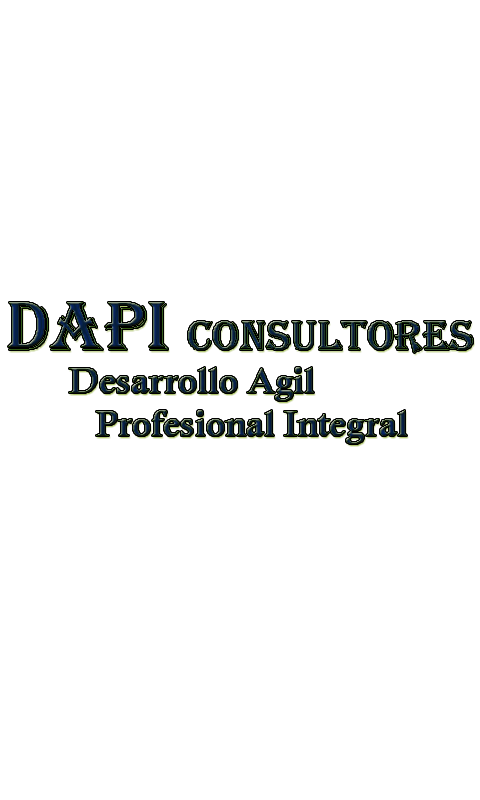
<style>
.page{position:relative;width:480px;height:800px;background:#ffffff}
.page>*{position:absolute;margin:0}
.t1{font:36px "CalisMTBol"}
.t2{font:72px "Algerian"}
.t3{font:44px "Algerian"}
</style>
<div class="page">
<p class="t1" style="left:8px;top:302px;width:465px;height:142px"><span class="t2">DAPI </span><span class="t3">CONSULTORES<br>       </span>Desarrollo Agil <br>       Profesional Integral</p>
</div>
